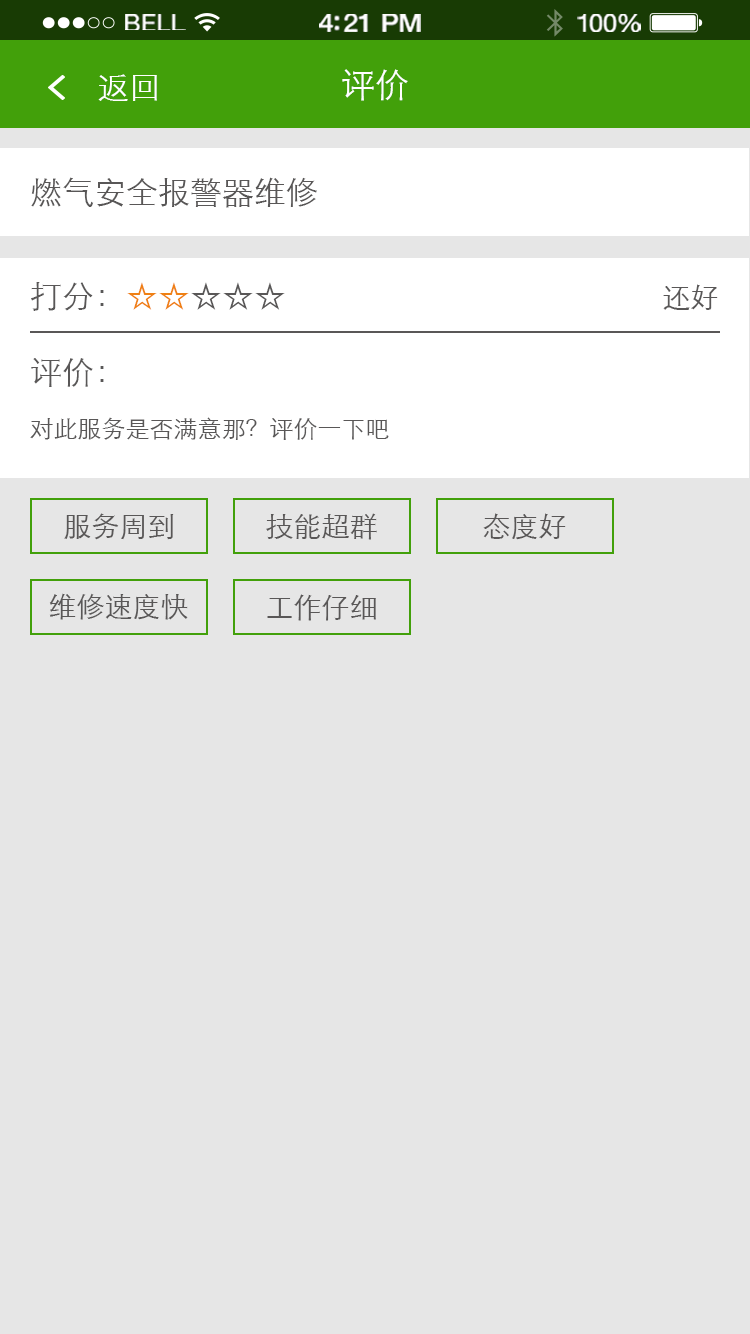
<style>
.page{position:relative;width:750px;height:1334px;background:#e6e6e6}
.page>*{position:absolute;margin:0}
.t1{font:23.3px "HelveticaNeue";letter-spacing:0.02em;color:#ffffff;scale:1.06 1}
.t2{font:25.3px "HelveticaNeue-Medium";letter-spacing:-0.02em;color:#ffffff;scale:1.06 1}
.t3{font:24.3px "HelveticaNeue";letter-spacing:-0.02em;color:#ffffff;scale:1.06 1}
.t4{font:32px "STXihei";color:#ffffff}
.t5{font:34px "STXihei";color:#ffffff}
.t6{font:32px "STXihei";color:#595757}
.t7{font:32px "STXihei";color:#ef8013}
.t8{font:28px "STXihei";color:#595757}
.t9{font:24px "STXihei";color:#595757}
</style>
<div class="page">
<p class="t1" style="left:125px;top:14px;width:61px;height:16px">BELL</p>
<p class="t2" style="left:319px;top:14px;width:102px;height:18px">4:21 PM</p>
<p class="t3" style="left:577px;top:14px;width:64px;height:18px">100%</p>
<p class="t4" style="left:98px;top:74px;width:59px;height:27px">返回</p>
<p class="t5" style="left:342px;top:69px;width:66px;height:32px">评价</p>
<p class="t6" style="left:31px;top:177px;width:286px;height:31px">燃气安全报警器维修</p>
<p class="t6" style="left:31px;top:282px;width:254px;height:29px">打分：<span class="t7">☆☆</span>☆☆☆</p>
<p class="t8" style="left:663px;top:284px;width:55px;height:26px">还好</p>
<p class="t6" style="left:31px;top:358px;width:73px;height:29px">评价：</p>
<p class="t9" style="left:30px;top:417px;width:359px;height:23px">对此服务是否满意那？评价一下吧</p>
<p class="t8" style="left:64px;top:513px;width:110px;height:27px">服务周到</p>
<p class="t8" style="left:266px;top:513px;width:111px;height:27px">技能超群</p>
<p class="t8" style="left:483px;top:513px;width:83px;height:27px">态度好</p>
<p class="t8" style="left:49px;top:593px;width:139px;height:27px">维修速度快</p>
<p class="t8" style="left:267px;top:594px;width:109px;height:27px">工作仔细</p>
</div>
